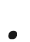
<style>
.page{position:relative;width:30px;height:42px;background:#ffffff}
.page>*{position:absolute;margin:0}
.t1{font:48px "AdobeHeitiStd-Regular";letter-spacing:0.04em;color:#191919;font-weight:bold;font-style:italic}
</style>
<div class="page">
<p class="t1" style="left:8px;top:30px;width:9px;height:10px">.</p>
</div>
